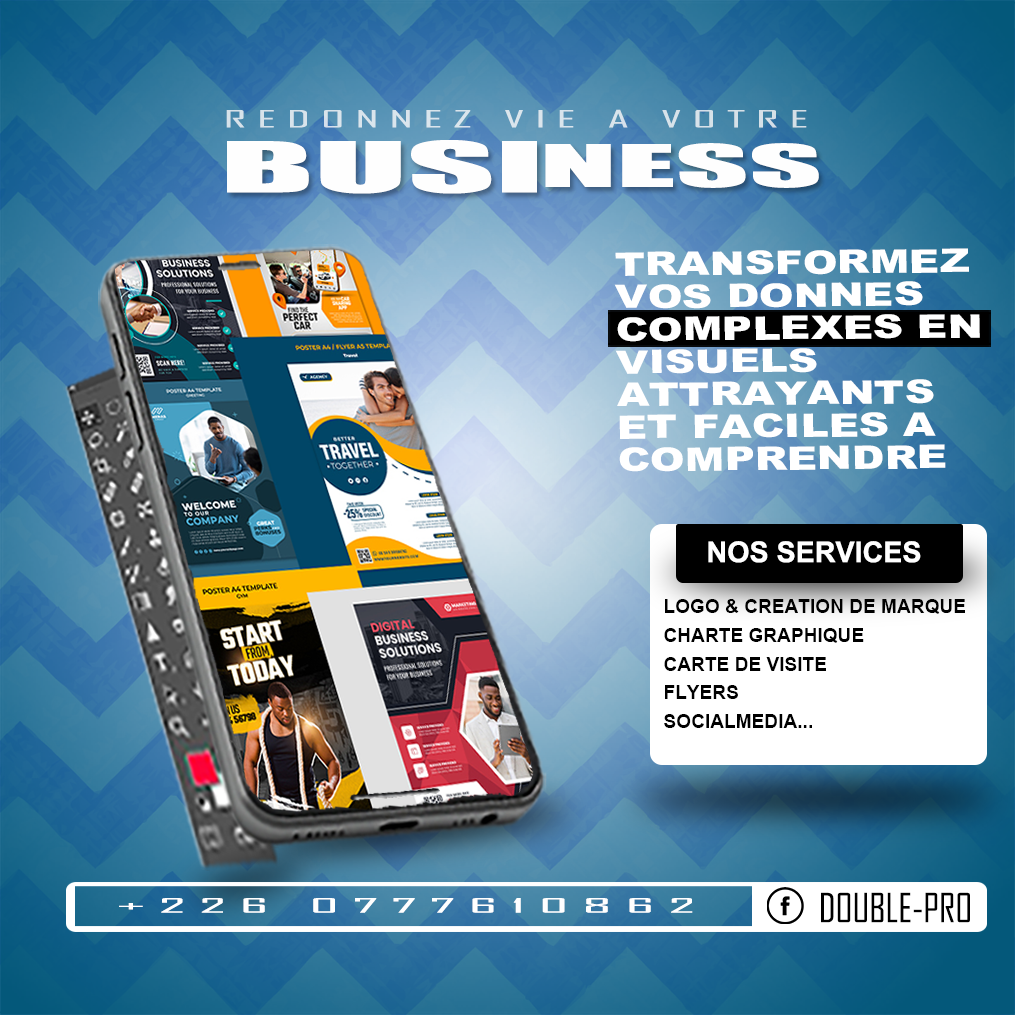
<style>
.page{position:relative;width:1015px;height:1015px}
.page>*{position:absolute;margin:0}
.t1{font:22.8px "AgencyFB-Reg";letter-spacing:0.2em;color:#d8e3eb;scale:2.35 1}
.t2{font:64.9px "Impact";color:#fefefe;scale:2.62 1}
.t3{font:54.1px "Impact";color:#fefefe;scale:2.62 1}
.t4{font:32.6px "Arial-Black";color:#ffffff;scale:1.28 1}
.t5{font:28.7px "Arial-BoldMT";color:#ffffff}
.t6{font:19.1px/28.7px "Arial-BoldMT";color:#000000}
.t7{font:38.2px "AgencyFB-Reg";color:#000000}
.t8{font:18.8px "AgencyFB-Reg";color:#ffffff;scale:3.67 1}
</style>
<div class="page">
<p class="t1" style="left:226px;top:109px;width:581px;height:19px">REDONNEZ VIE A VOTRE</p>
<p class="t2" style="left:227px;top:140px;width:310px;height:54px">BUSI</p>
<p class="t3" style="left:545px;top:143px;width:274px;height:45px">NESS</p>
<p class="t4" style="left:614px;top:248px;width:366px;height:224px;rotate:-1deg">TRANSFORMEZ VOS DONNES COMPLEXES EN VISUELS ATTRAYANTS ET FACILES A COMPRENDRE</p>
<p class="t5" style="left:708px;top:541px;width:213px;height:22px">NOS SERVICES</p>
<p class="t6" style="left:664px;top:599px;width:301px;height:129px">LOGO &amp; CREATION DE MARQUE<br>CHARTE GRAPHIQUE<br>CARTE DE VISITE<br>FLYERS<br>SOCIALMEDIA...</p>
<p class="t7" style="left:821px;top:892px;width:149px;height:31px">DOUBLE-PRO</p>
<p class="t8" style="left:119px;top:898px;width:574px;height:15px">+ 2 2 6   0 7 7 7 6 1 0 8 6 2</p>
</div>
